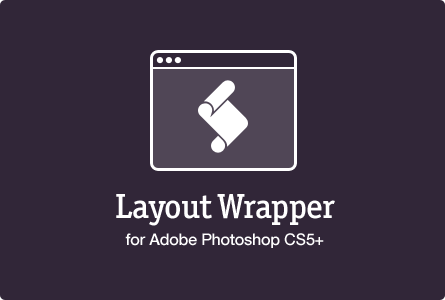
<style>
.page{position:relative;width:445px;height:300px;background:#312638}
.page>*{position:absolute;margin:0}
.t1{font:35px "OfficinaSerifITCPro-Medium";letter-spacing:-0.01em;color:#ffffff}
.t2{font:16px "HelveticaNeue-Medium";letter-spacing:-0.01em;color:#ffffff}
</style>
<div class="page">
<p class="t1" style="left:116px;top:194px;width:219px;height:32px">Layout Wrapper</p>
<p class="t2" style="left:125px;top:233px;width:199px;height:15px">for Adobe Photoshop CS5+</p>
</div>
